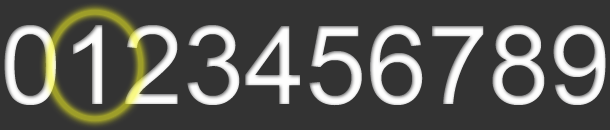
<style>
.page{position:relative;width:610px;height:130px;background:#333333}
.page>*{position:absolute;margin:0}
.t1{font:109.9px "ArialMT";color:#fefefe}
</style>
<div class="page">
<p class="t1" style="left:4px;top:25px;width:602px;height:81px">0123456789</p>
</div>
